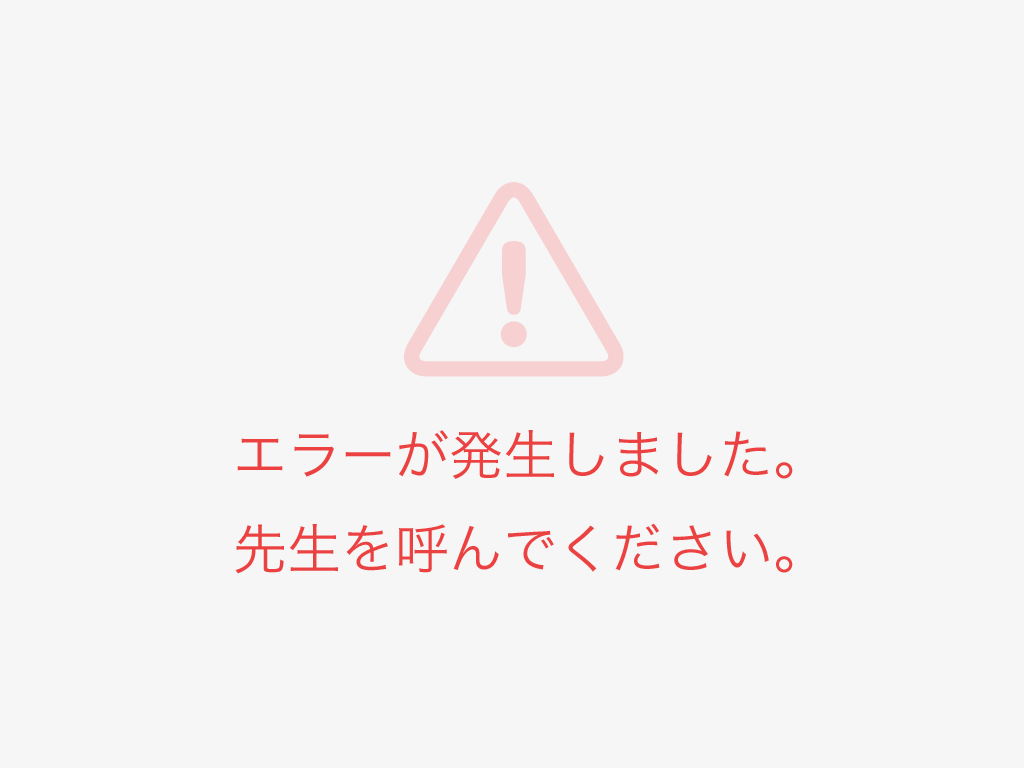
<style>
.page{position:relative;width:1024px;height:768px;background:#f6f6f6}
.page>*{position:absolute;margin:0}
.t1{font:54px "HiraKakuPro-W3";color:#eb4241}
</style>
<div class="page">
<p class="t1" style="left:235px;top:430px;width:558px;height:144px">エラーが発生しました。<br>先生を呼んでください。</p>
</div>
